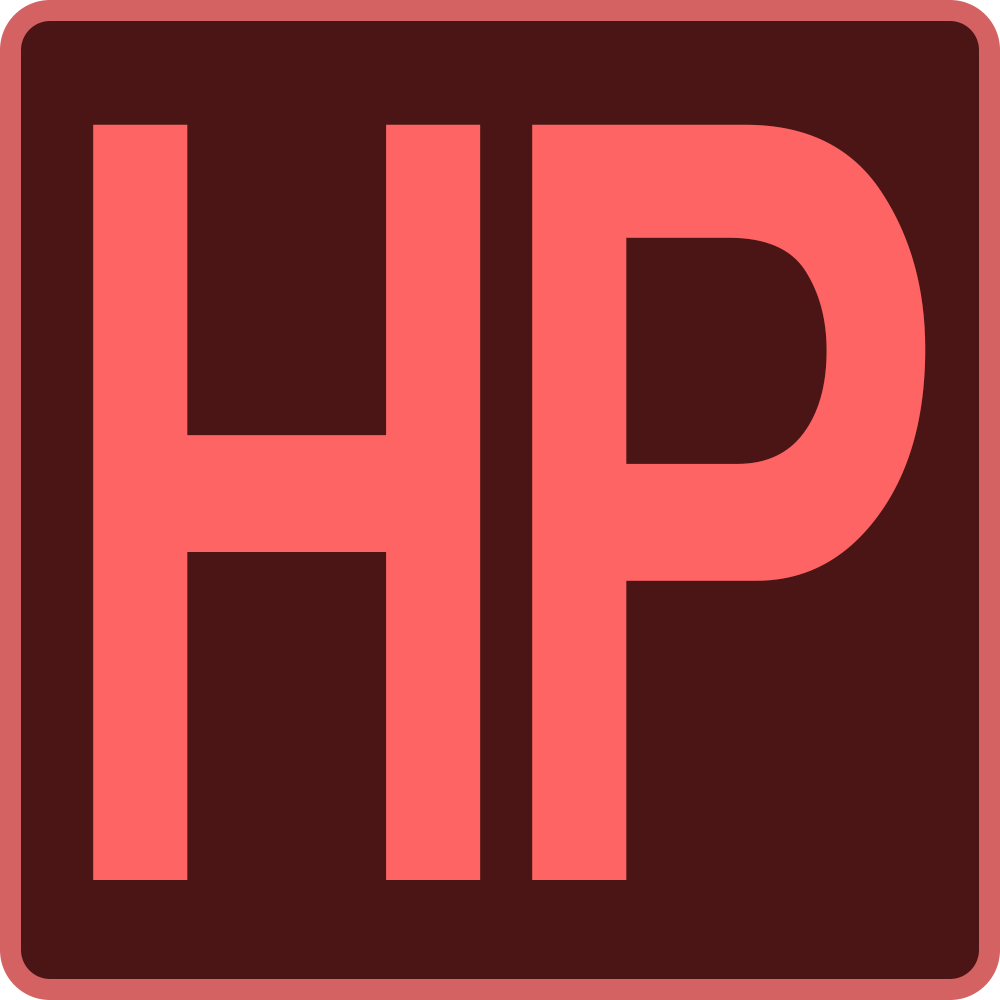
<style>
.page{position:relative;width:1000px;height:1000px;background:#4b1515}
.page>*{position:absolute;margin:0}
.t1{font:1133.3px "FranklinGothic-Medium";letter-spacing:-0.08em;color:#ff6464;scale:0.69 1}
</style>
<div class="page">
<p class="t1" style="left:93px;top:124px;width:833px;height:756px">HP</p>
</div>
